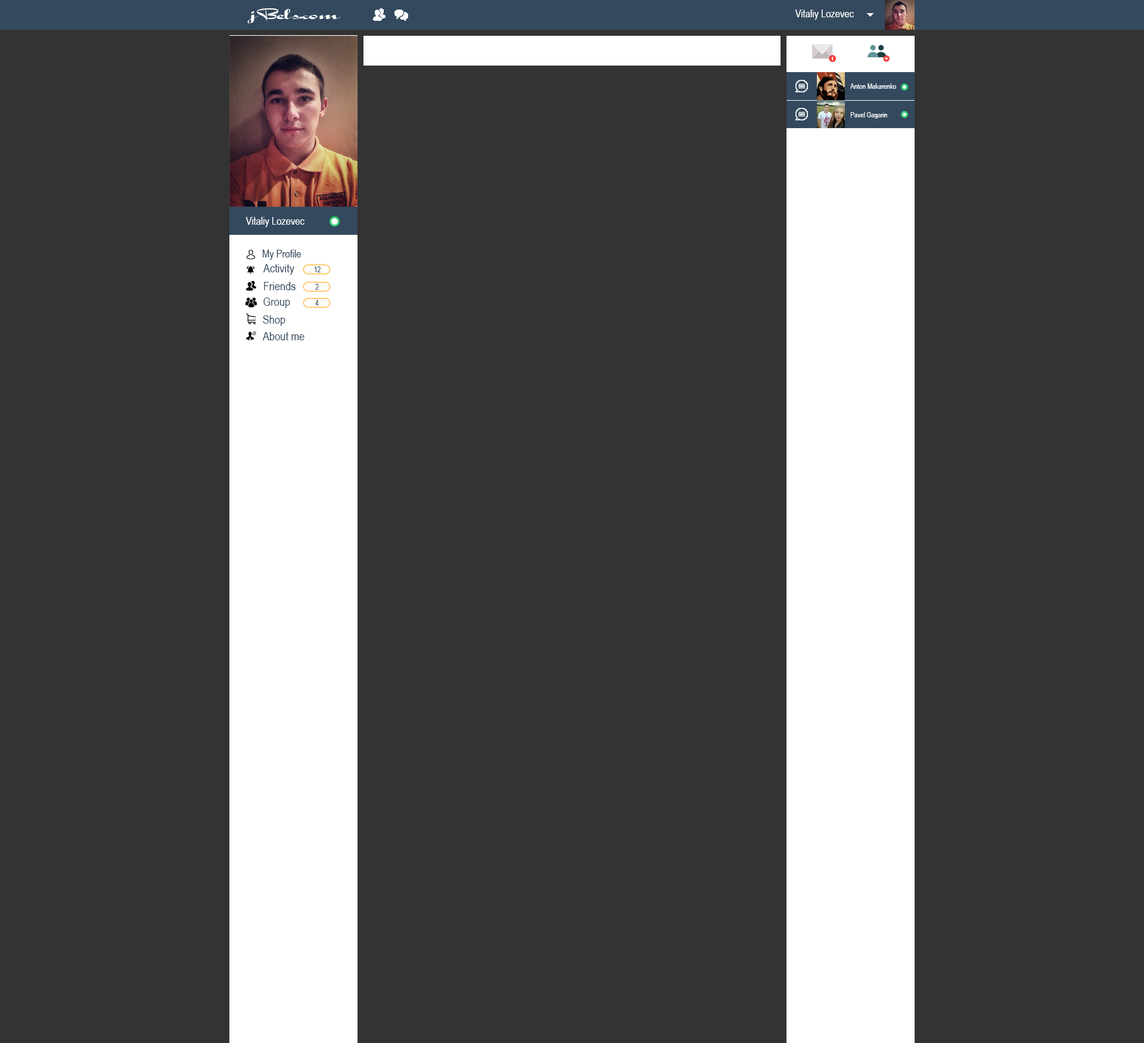
<style>
.page{position:relative;width:1144px;height:1043px;background:#333333}
.page>*{position:absolute;margin:0}
.t1{font:21.4px "ABSALOM";color:#ffffff}
.t2{font:10.7px "ArialNarrow";color:#ffffff}
.t3{font:7.1px "ArialNarrow";color:#ffffff}
.t4{font:10.7px "ArialNarrow";color:#34495e}
.t5{font:11.9px "ArialNarrow";color:#34495e}
.t6{font:7.1px "ArialNarrow";color:#34495e}
</style>
<div class="page">
<p class="t1" style="left:247px;top:8px;width:94px;height:15px">jBels.com</p>
<p class="t2" style="left:795px;top:10px;width:59px;height:10px">Vitaliy Lozevec</p>
<p class="t3" style="left:850px;top:83px;width:46px;height:6px">Anton Makarenko</p>
<p class="t3" style="left:850px;top:112px;width:37px;height:7px">Pavel Gagarin</p>
<p class="t2" style="left:245px;top:217px;width:59px;height:10px">Vitaliy Lozevec</p>
<p class="t4" style="left:263px;top:250px;width:38px;height:10px">My Profile</p>
<p class="t5" style="left:263px;top:264px;width:31px;height:11px">Activity</p>
<p class="t6" style="left:315px;top:266px;width:6px;height:6px">12</p>
<p class="t5" style="left:264px;top:282px;width:31px;height:8px">Friends</p>
<p class="t6" style="left:315px;top:284px;width:4px;height:6px">2</p>
<p class="t5" style="left:263px;top:297px;width:27px;height:11px">Group</p>
<p class="t6" style="left:315px;top:300px;width:4px;height:6px">4</p>
<p class="t5" style="left:263px;top:315px;width:22px;height:11px">Shop</p>
<p class="t5" style="left:263px;top:332px;width:41px;height:8px">About me</p>
</div>
